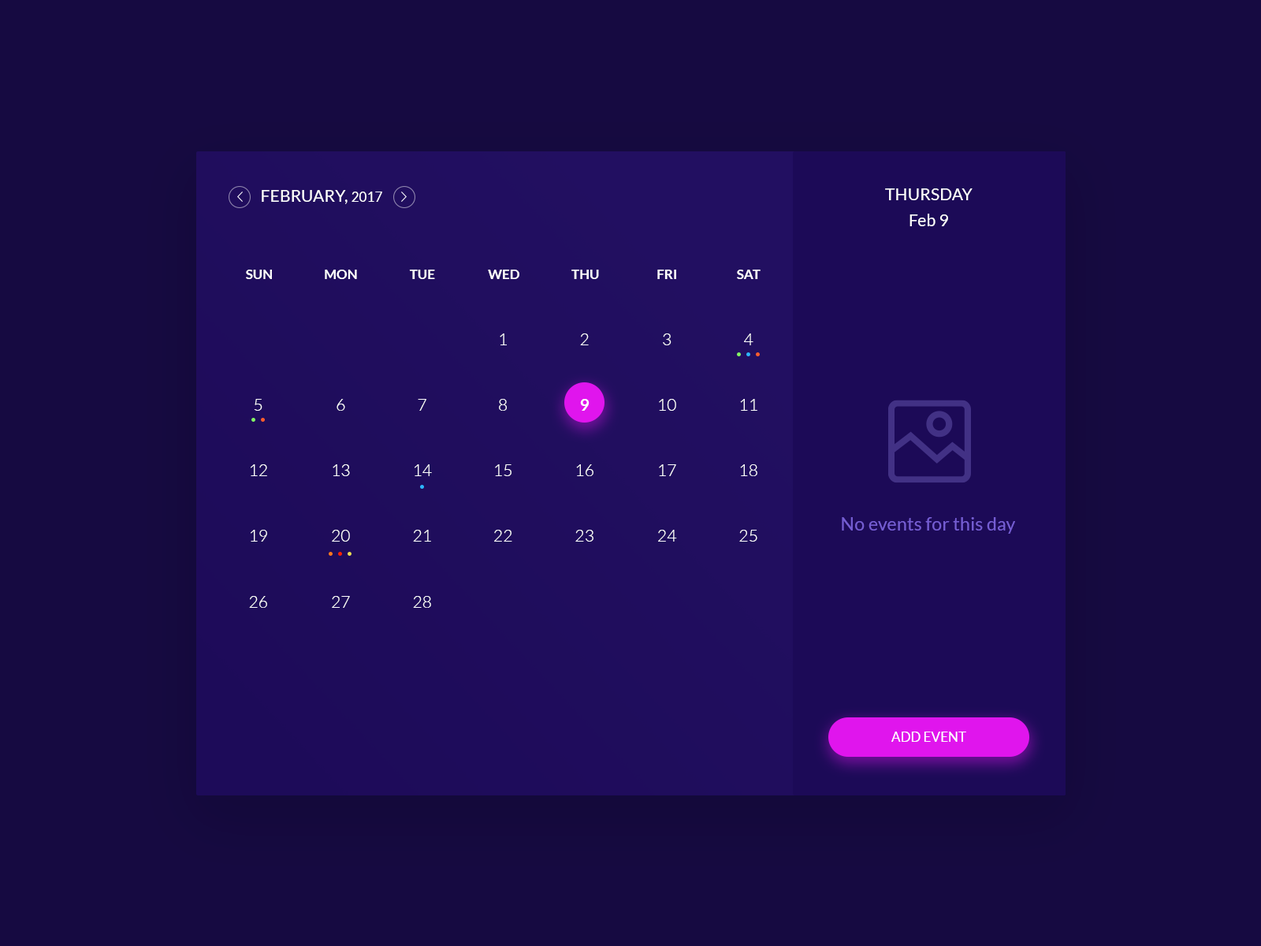
<style>
.page{position:relative;width:1261px;height:946px;background:#160a41}
.page>*{position:absolute;margin:0}
.t1{font:16.8px "Lato-Regular";color:#ffffff;text-transform:uppercase}
.t2{font:13.4px "Lato-Regular";color:#ffffff;text-transform:uppercase}
.t3{font:16.8px/26.1px "Lato-Regular";color:#ffffff;text-transform:uppercase}
.t4{font:16.8px/26.1px "Lato-Regular";color:#ffffff}
.t5{font:13.4px "Lato-Bold";color:#ffffff;text-transform:uppercase}
.t6{font:16.8px "Lato-Light";color:#ffffff;text-transform:uppercase}
.t7{font:16.8px "Lato-Bold";color:#ffffff;text-transform:uppercase}
.t8{font:18.5px "Lato-Regular";color:#755dd4}
</style>
<div class="page">
<p class="t1" style="left:262px;top:190px;width:120px;height:14px">February, <span class="t2">2017</span></p>
<p class="t3" style="left:885px;top:188px;width:87px;height:38px;text-align:center">Thursday<br><span class="t4">Feb 9</span></p>
<p class="t5" style="left:246px;top:270px;width:26px;height:9px">sun</p>
<p class="t5" style="left:325px;top:270px;width:32px;height:9px">mon</p>
<p class="t5" style="left:409px;top:270px;width:26px;height:9px">tue</p>
<p class="t5" style="left:488px;top:270px;width:31px;height:9px">wed</p>
<p class="t5" style="left:571px;top:270px;width:28px;height:9px">thu</p>
<p class="t5" style="left:657px;top:270px;width:19px;height:9px">fri</p>
<p class="t5" style="left:737px;top:270px;width:23px;height:9px">sat</p>
<p class="t6" style="left:500px;top:333px;width:7px;height:12px">1</p>
<p class="t6" style="left:580px;top:333px;width:9px;height:12px">2</p>
<p class="t6" style="left:663px;top:333px;width:8px;height:12px">3</p>
<p class="t6" style="left:744px;top:333px;width:9px;height:12px">4</p>
<p class="t6" style="left:254px;top:399px;width:8px;height:12px">5</p>
<p class="t6" style="left:337px;top:399px;width:8px;height:12px">6</p>
<p class="t6" style="left:418px;top:399px;width:8px;height:12px">7</p>
<p class="t6" style="left:499px;top:399px;width:8px;height:12px">8</p>
<p class="t7" style="left:580px;top:399px;width:9px;height:12px">9</p>
<p class="t6" style="left:659px;top:399px;width:17px;height:12px">10</p>
<p class="t6" style="left:740px;top:399px;width:17px;height:12px">11</p>
<p class="t6" style="left:251px;top:464px;width:16px;height:12px">12</p>
<p class="t6" style="left:333px;top:464px;width:17px;height:12px">13</p>
<p class="t6" style="left:415px;top:464px;width:17px;height:12px">14</p>
<p class="t6" style="left:495px;top:464px;width:16px;height:12px">15</p>
<p class="t6" style="left:576px;top:464px;width:17px;height:12px">16</p>
<p class="t6" style="left:659px;top:464px;width:17px;height:12px">17</p>
<p class="t6" style="left:740px;top:464px;width:17px;height:12px">18</p>
<p class="t8" style="left:842px;top:517px;width:173px;height:17px">No events for this day</p>
<p class="t6" style="left:251px;top:530px;width:16px;height:11px">19</p>
<p class="t6" style="left:332px;top:530px;width:18px;height:11px">20</p>
<p class="t6" style="left:413px;top:530px;width:18px;height:11px">21</p>
<p class="t6" style="left:494px;top:530px;width:18px;height:11px">22</p>
<p class="t6" style="left:575px;top:530px;width:18px;height:11px">23</p>
<p class="t6" style="left:658px;top:530px;width:19px;height:11px">24</p>
<p class="t6" style="left:739px;top:530px;width:18px;height:11px">25</p>
<p class="t6" style="left:249px;top:596px;width:18px;height:12px">26</p>
<p class="t6" style="left:332px;top:596px;width:18px;height:12px">27</p>
<p class="t6" style="left:413px;top:596px;width:18px;height:12px">28</p>
<p class="t2" style="left:891px;top:731px;width:75px;height:11px">Add event</p>
</div>
